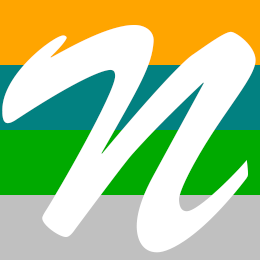
<style>
.page{position:relative;width:260px;height:260px;background:#ffffff}
.page>*{position:absolute;margin:0}
.t1{font:300px "BrushScriptStd";color:#ffffff}
</style>
<div class="page">
<p class="t1" style="left:2px;top:25px;width:254px;height:228px">N</p>
</div>
